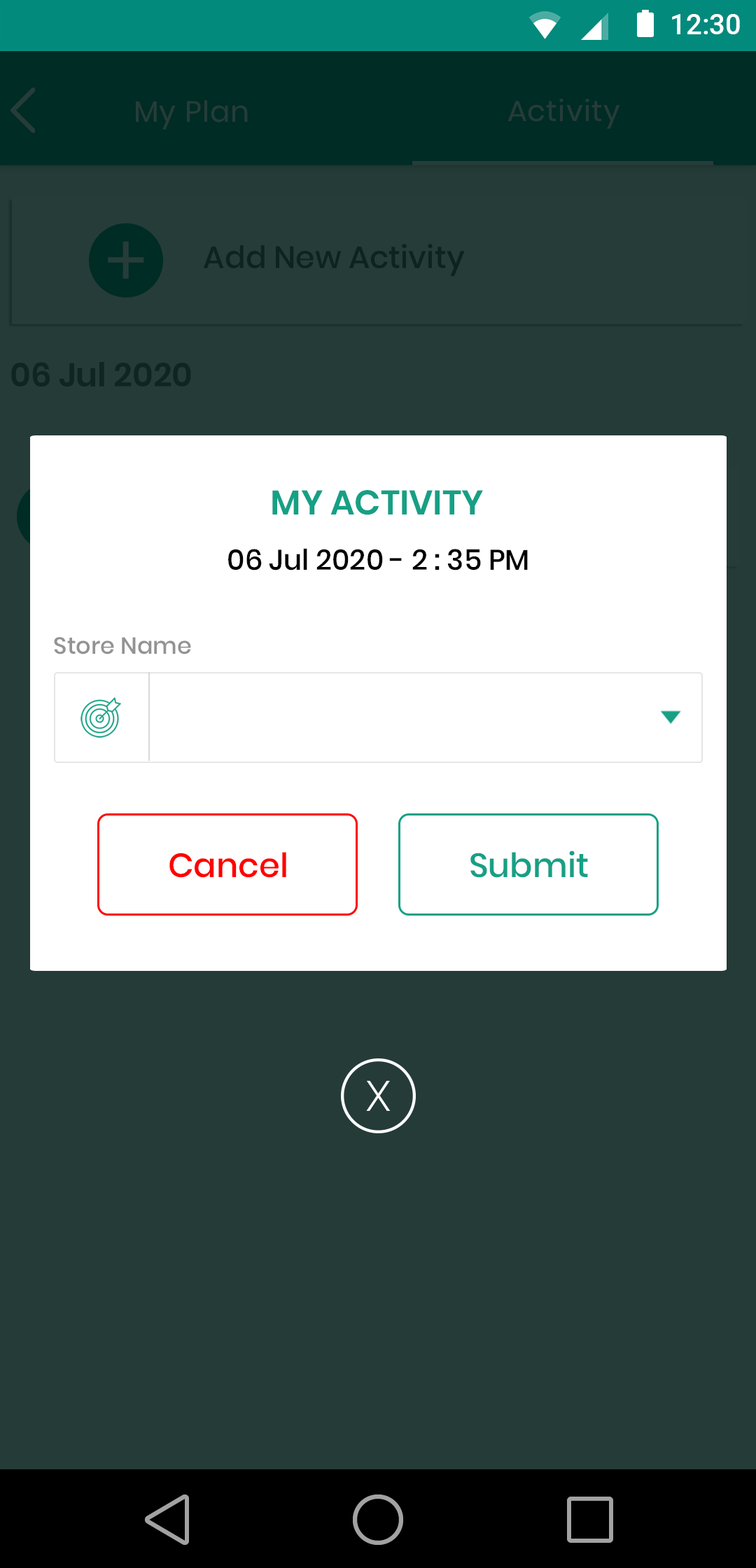
<style>
.page{position:relative;width:756px;height:1568px;background:#253b37}
.page>*{position:absolute;margin:0}
.t1{font:34.3px "Poppins-SemiBold";color:#16a085;text-transform:uppercase}
.t2{font:28.5px "Poppins-Medium";color:#000000}
.t3{font:23.4px "Poppins-Medium";color:#939393}
.t4{font:33.6px "Poppins-Medium";color:#ff0000}
.t5{font:33.6px "Poppins-Medium";color:#16a085}
.t6{font:42px "Roboto-Light";color:#ffffff}
</style>
<div class="page">
<p class="t1" style="left:272px;top:490px;width:211px;height:25px">My Activity</p>
<p class="t2" style="left:228px;top:548px;width:300px;height:22px">06 Jul 2020 - 2 : 35 PM</p>
<p class="t3" style="left:54px;top:637px;width:137px;height:17px">Store Name</p>
<p class="t4" style="left:169px;top:852px;width:117px;height:26px">Cancel</p>
<p class="t5" style="left:470px;top:850px;width:118px;height:28px">Submit</p>
<p class="t6" style="left:366px;top:1081px;width:25px;height:30px">X</p>
</div>
